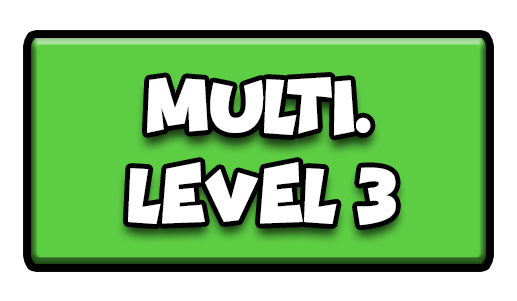
<style>
.page{position:relative;width:517px;height:301px;background:#ffffff}
.page>*{position:absolute;margin:0}
.t1{font:77.7px "Funhouse";color:#ffffff;scale:0.95 1}
</style>
<div class="page">
<p class="t1" style="left:147px;top:77px;width:224px;height:59px">MULTI.</p>
<p class="t1" style="left:128px;top:162px;width:268px;height:64px">LEVEL 3</p>
</div>
